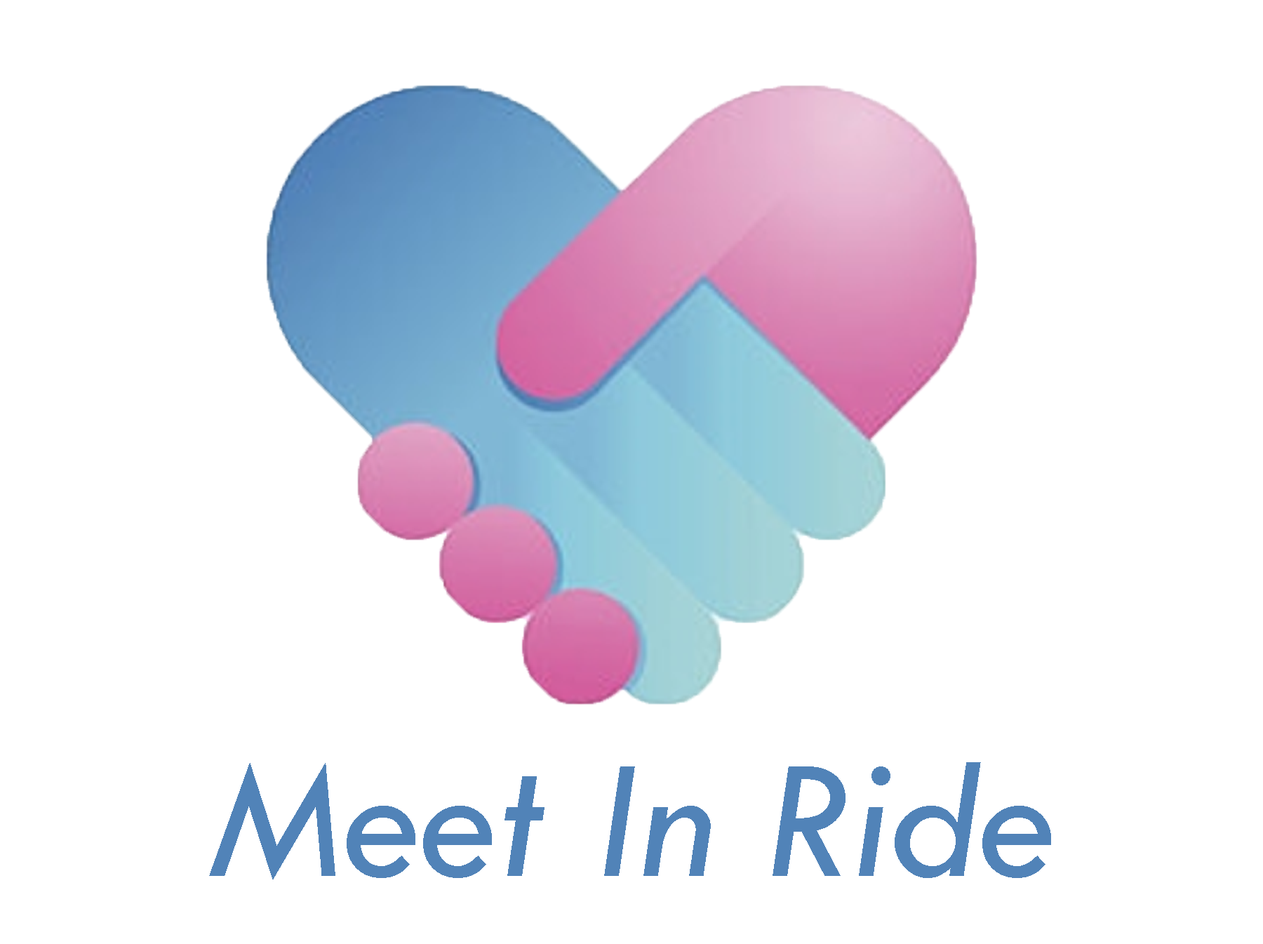
<style>
.page{position:relative;width:1263px;height:944px;background:#ffffff}
.page>*{position:absolute;margin:0}
.t1{font:175.5px "TwCenMT-Italic";color:#5183b8}
</style>
<div class="page">
<p class="t1" style="left:209px;top:762px;width:842px;height:117px">Meet In Ride</p>
</div>
